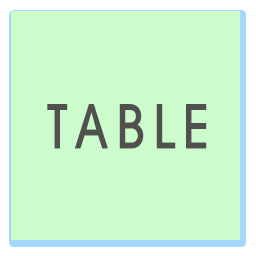
<style>
.page{position:relative;width:256px;height:256px;background:#ccfccb}
.page>*{position:absolute;margin:0}
.t1{font:60px "AvantGarde-Medium";letter-spacing:0.15em;color:#50514f;text-transform:uppercase;scale:0.84 1}
</style>
<div class="page">
<p class="t1" style="left:47px;top:104px;width:160px;height:45px">TABLE</p>
</div>
